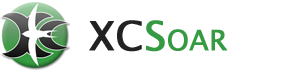
<style>
.page{position:relative;width:300px;height:70px;background:#ffffff}
.page>*{position:absolute;margin:0}
.t1{font:40px "LucidaSansUnicode";color:#359a41;font-variant:small-caps;font-weight:bold}
.t2{font:40px "LucidaSansUnicode";color:#222222;font-variant:small-caps;font-weight:bold}
</style>
<div class="page">
<p class="t1" style="left:89px;top:20px;width:139px;height:32px"><span class="t2">XC</span>Soar</p>
</div>
